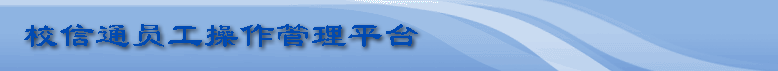
<style>
.page{position:relative;width:778px;height:71px;background:#8eb4e2}
.page>*{position:absolute;margin:0}
.t1{font:36px "LiSu";color:#004ab3}
</style>
<div class="page">
<p class="t1" style="left:24px;top:24px;width:394px;height:23px">校信通员工操作管理平台</p>
</div>
